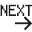
<style>
.page{position:relative;width:32px;height:32px;background:#ffffff}
.page>*{position:absolute;margin:0}
.t1{font:16.6px "Pokemon-FireLeaf";color:#1e1a1d}
.t2{font:23.3px "SFProDisplay-Regular";color:#1e1a1d}
</style>
<div class="page">
<p class="t1" style="left:0px;top:4px;width:33px;height:12px">NEXT</p>
<p class="t2" style="left:15px;top:16px;width:17px;height:15px">→</p>
</div>
